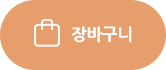
<style>
.page{position:relative;width:166px;height:70px;background:#e69e6c}
.page>*{position:absolute;margin:0}
.t1{font:17px "NanumGothicExtraBold";letter-spacing:-0.03em;color:#ffffff}
</style>
<div class="page">
<p class="t1" style="left:71px;top:26px;width:61px;height:17px">장바구니</p>
</div>
